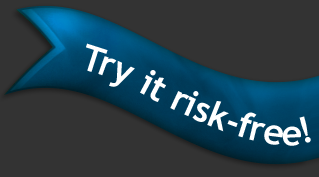
<style>
.page{position:relative;width:319px;height:177px;background:#333333}
.page>*{position:absolute;margin:0}
.t1{font:36px "TrebuchetMS-Bold";letter-spacing:-0.01em;color:#ffffff}
</style>
<div class="page">
<p class="t1" style="left:86px;top:43px;width:225px;height:103px">Try it risk-free!</p>
</div>
